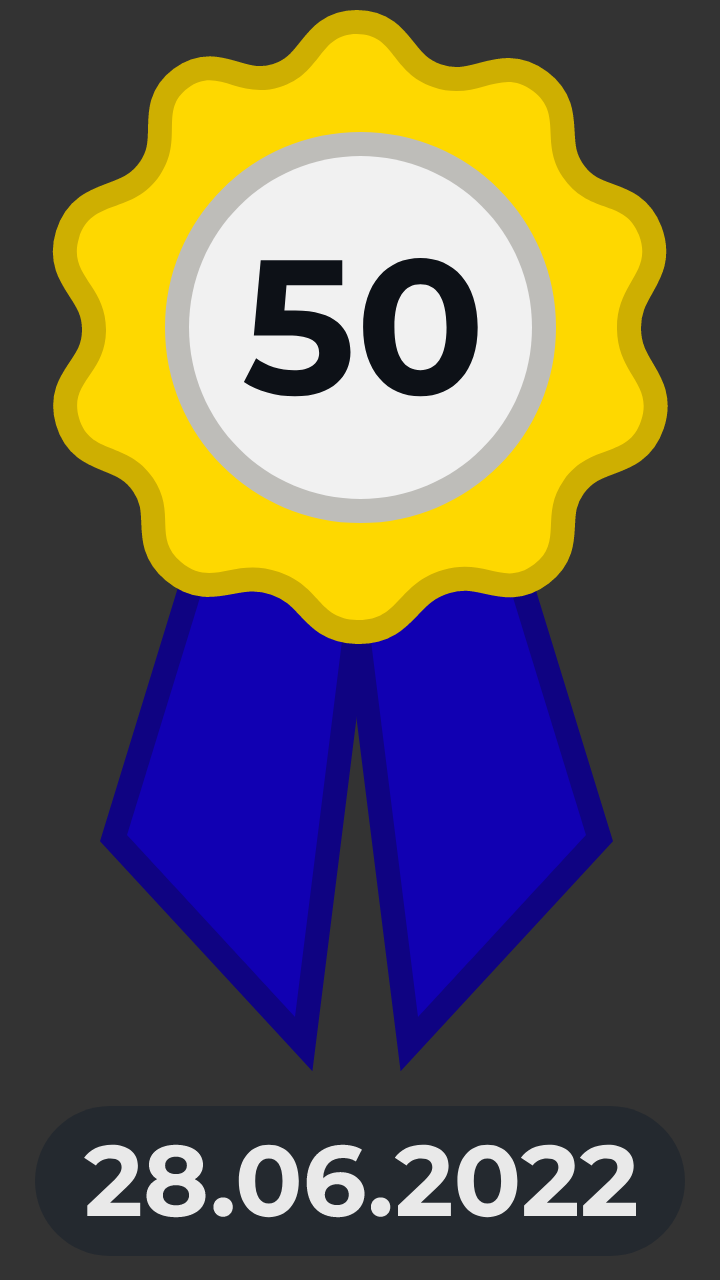
<style>
.page{position:relative;width:720px;height:1280px;background:#333333}
.page>*{position:absolute;margin:0}
.t1{font:191px "Montserrat-Bold";color:#0d1117}
.t2{font:100px "Montserrat-Bold";color:#e9e9e9}
</style>
<div class="page">
<p class="t1" style="left:243px;top:258px;width:235px;height:139px">50</p>
<p class="t2" style="left:84px;top:1144px;width:552px;height:74px">28.06.2022</p>
</div>
